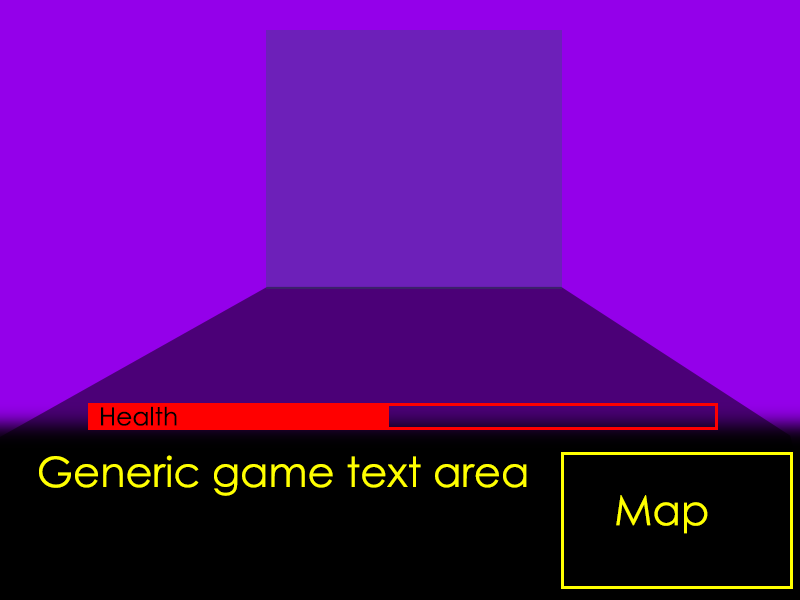
<style>
.page{position:relative;width:800px;height:600px;background:#9400ea}
.page>*{position:absolute;margin:0}
.t1{font:25px "CenturyGothic";color:#000000}
.t2{font:41.7px "CenturyGothic";color:#ffff00}
</style>
<div class="page">
<p class="t1" style="left:101px;top:406px;width:76px;height:20px">Health</p>
<p class="t2" style="left:39px;top:455px;width:488px;height:41px">Generic game text area</p>
<p class="t2" style="left:616px;top:495px;width:92px;height:39px">Map</p>
</div>
